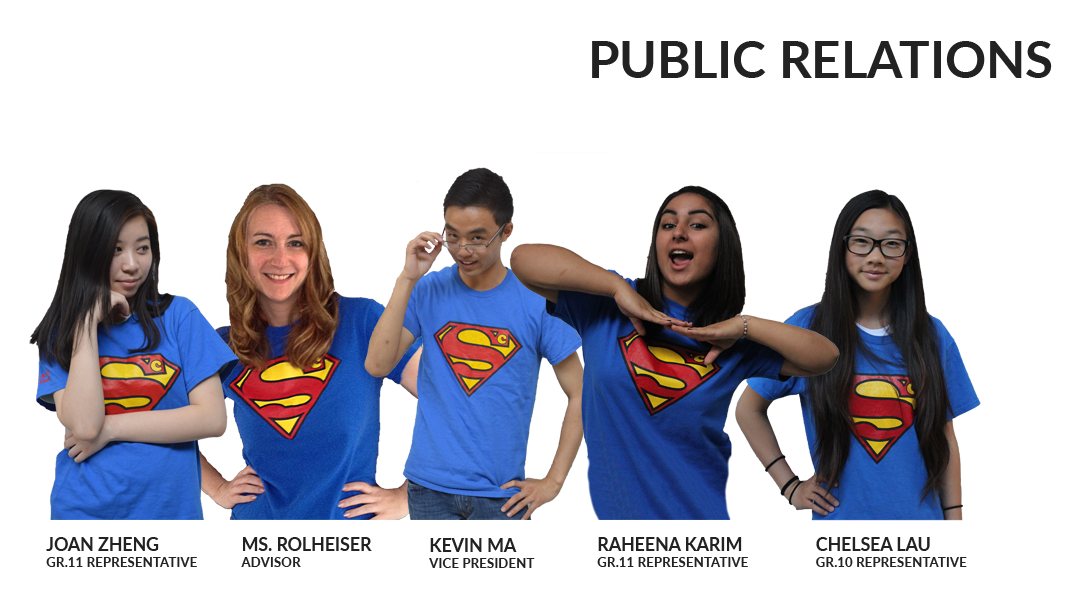
<style>
.page{position:relative;width:1080px;height:600px;background:#ffffff}
.page>*{position:absolute;margin:0}
.t1{font:51px "Lato-Bold";color:#222222}
.t2{font:13.4px "Lato-Bold";color:#222222}
.t3{font:17.7px "Lato-Bold";color:#222222}
</style>
<div class="page">
<p class="t1" style="left:592px;top:41px;width:460px;height:37px">PUBLIC RELATIONS</p>
<p class="t2" style="left:46px;top:537px;width:151px;height:30px"><span class="t3">JOAN ZHENG<br></span>GR.11 REPRESENTATIVE</p>
<p class="t3" style="left:241px;top:537px;width:131px;height:30px">MS. ROLHEISER<br><span class="t2">ADVISOR</span></p>
<p class="t2" style="left:429px;top:538px;width:106px;height:30px"><span class="t3">KEVIN MA<br></span>VICE PRESIDENT</p>
<p class="t2" style="left:597px;top:537px;width:151px;height:30px"><span class="t3">RAHEENA KARIM<br></span>GR.11 REPRESENTATIVE</p>
<p class="t2" style="left:816px;top:537px;width:151px;height:30px"><span class="t3">CHELSEA LAU<br></span>GR.10 REPRESENTATIVE</p>
</div>
